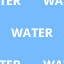
<style>
.page{position:relative;width:64px;height:64px;background:#77bbff}
.page>*{position:absolute;margin:0}
.t1{font:12px "OpenSans-Bold";color:#ffffff}
</style>
<div class="page">
<p class="t1" style="left:11px;top:28px;width:42px;height:9px">WATER</p>
</div>
